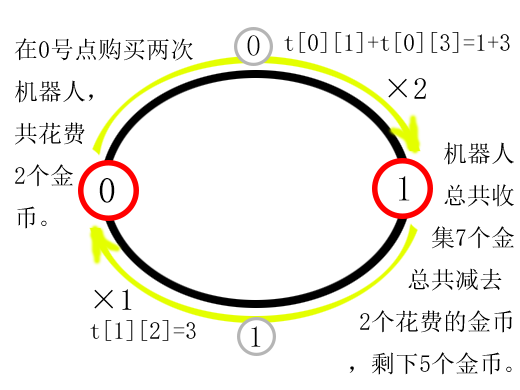
<style>
.page{position:relative;width:520px;height:390px;background:#ffffff}
.page>*{position:absolute;margin:0}
.t1{font:24px "SimSun";color:#000000}
.t2{font:30px "SimSun";color:#000000}
.t3{font:36px "SimSun";color:#000000}
</style>
<div class="page">
<p class="t1" style="left:14px;top:38px;width:179px;height:191px">在0号点购买两次<br>机器人，<br>共花费<br>2个金<br>币。</p>
<p class="t2" style="left:247px;top:35px;width:13px;height:21px">0</p>
<p class="t1" style="left:284px;top:32px;width:226px;height:21px">t[0][1]+t[0][3]=1+3</p>
<p class="t2" style="left:388px;top:78px;width:38px;height:21px">×2</p>
<p class="t1" style="left:349px;top:142px;width:165px;height:233px">机器人<br>        总共收<br>       集7个金<br>     总共减去<br> 2个花费的金币<br>，剩下5个金币。</p>
<p class="t3" style="left:99px;top:178px;width:16px;height:25px">0</p>
<p class="t3" style="left:399px;top:176px;width:11px;height:25px">1</p>
<p class="t2" style="left:94px;top:289px;width:38px;height:21px">×1</p>
<p class="t1" style="left:90px;top:320px;width:106px;height:21px">t[1][2]=3</p>
<p class="t2" style="left:251px;top:326px;width:10px;height:21px">1</p>
</div>
